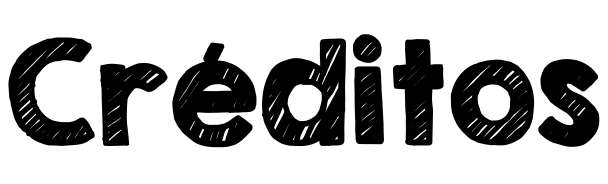
<style>
.page{position:relative;width:608px;height:184px;background:#ffffff}
.page>*{position:absolute;margin:0}
.t1{font:125px "KGSecondChancesSketch";color:#000000;font-weight:bold}
</style>
<div class="page">
<p class="t1" style="left:8px;top:34px;width:592px;height:114px">Créditos</p>
</div>
